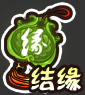
<style>
.page{position:relative;width:85px;height:95px}
.page>*{position:absolute;margin:0}
.t1{font:26px "DFPBuDingW12"}
</style>
<div class="page">
<p class="t1" style="left:31px;top:67px;width:50px;height:24px">结缘</p>
</div>
